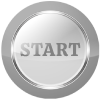
<style>
.page{position:relative;width:100px;height:100px;background:#ffffff}
.page>*{position:absolute;margin:0}
.t1{font:18.6px "Calistoga-Regular";letter-spacing:0.03em;color:#828282}
</style>
<div class="page">
<p class="t1" style="left:20px;top:42px;width:61px;height:15px">START</p>
</div>
